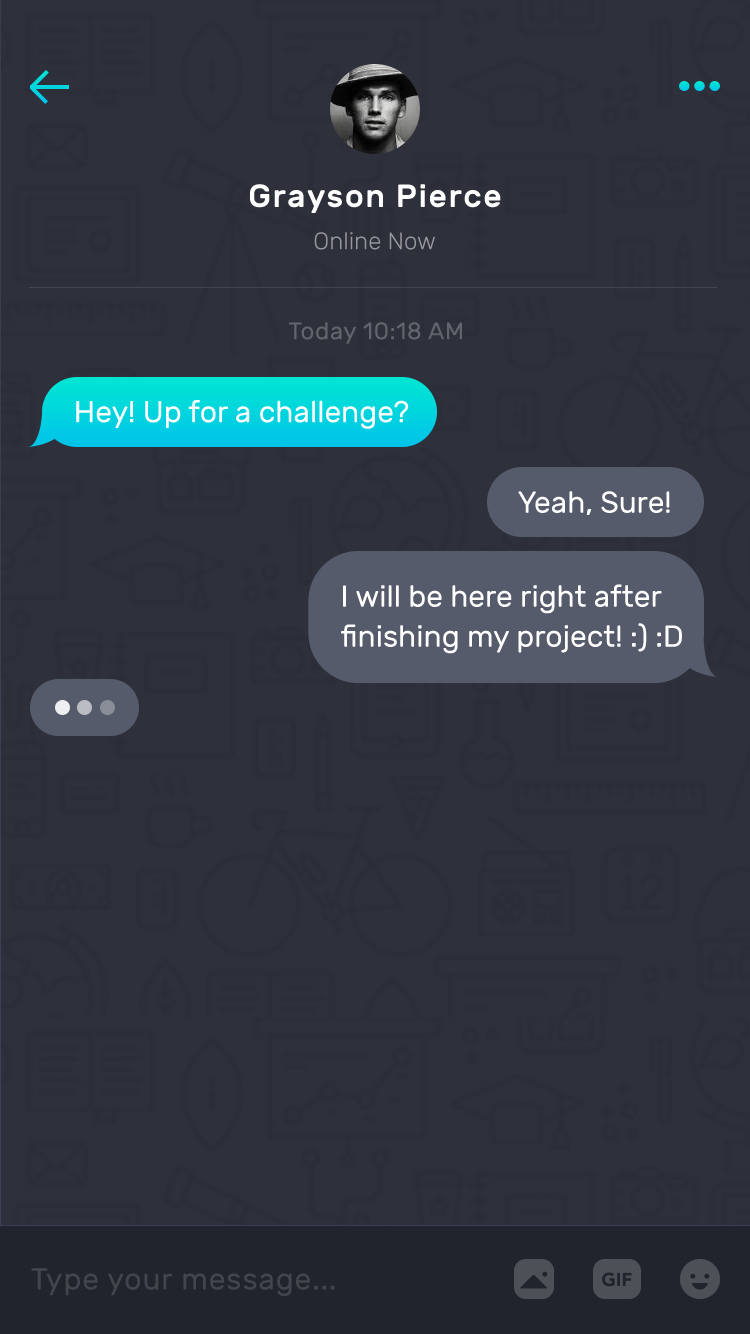
<style>
.page{position:relative;width:750px;height:1334px;background:#2e313c}
.page>*{position:absolute;margin:0}
.t1{font:32px "Rubik-Medium";letter-spacing:0.05em;color:#ffffff}
.t2{font:24px "Rubik-Light";color:#97989e}
.t3{font:24px "Rubik-Regular";letter-spacing:0.025em;color:#62656d}
.t4{font:30px "Rubik-Regular";color:#ffffff}
.t5{font:30.3px "Rubik-Regular";color:#ffffff}
.t6{font:30.3px/40px "Rubik-Regular";color:#ffffff}
.t7{font:30px "Rubik-Regular";letter-spacing:0.03em;color:#42454b}
</style>
<div class="page">
<p class="t1" style="left:250px;top:184px;width:251px;height:29px">Grayson Pierce</p>
<p class="t2" style="left:314px;top:232px;width:121px;height:18px">Online Now</p>
<p class="t3" style="left:289px;top:322px;width:173px;height:22px">Today 10:18 AM</p>
<p class="t4" style="left:76px;top:400px;width:333px;height:29px">Hey! Up for a challenge?</p>
<p class="t5" style="left:518px;top:491px;width:152px;height:24px">Yeah, Sure!</p>
<p class="t6" style="left:341px;top:584px;width:341px;height:70px">I will be here right after<br>finishing my project! :) :D</p>
<p class="t7" style="left:31px;top:1268px;width:304px;height:28px">Type your message...</p>
</div>
